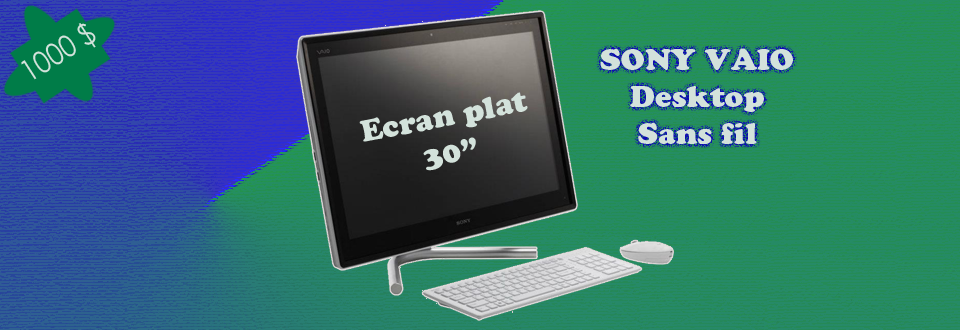
<style>
.page{position:relative;width:960px;height:330px}
.page>*{position:absolute;margin:0}
.t1{font:30px "CenturyGothic";color:#d3e2db;scale:0.9 1}
.t2{font:30px/37px "CooperBlackStd";color:#d3e2db}
</style>
<div class="page">
<p class="t1" style="left:21px;top:23px;width:75px;height:57px;rotate:-33deg">1000 $</p>
<p class="t2" style="left:600px;top:48px;width:193px;height:97px;text-align:center">SONY VAIO<br>Desktop<br>Sans fil</p>
<p class="t2" style="left:359px;top:92px;width:169px;height:79px;text-align:center;rotate:-11deg">Ecran plat<br>30”</p>
</div>
